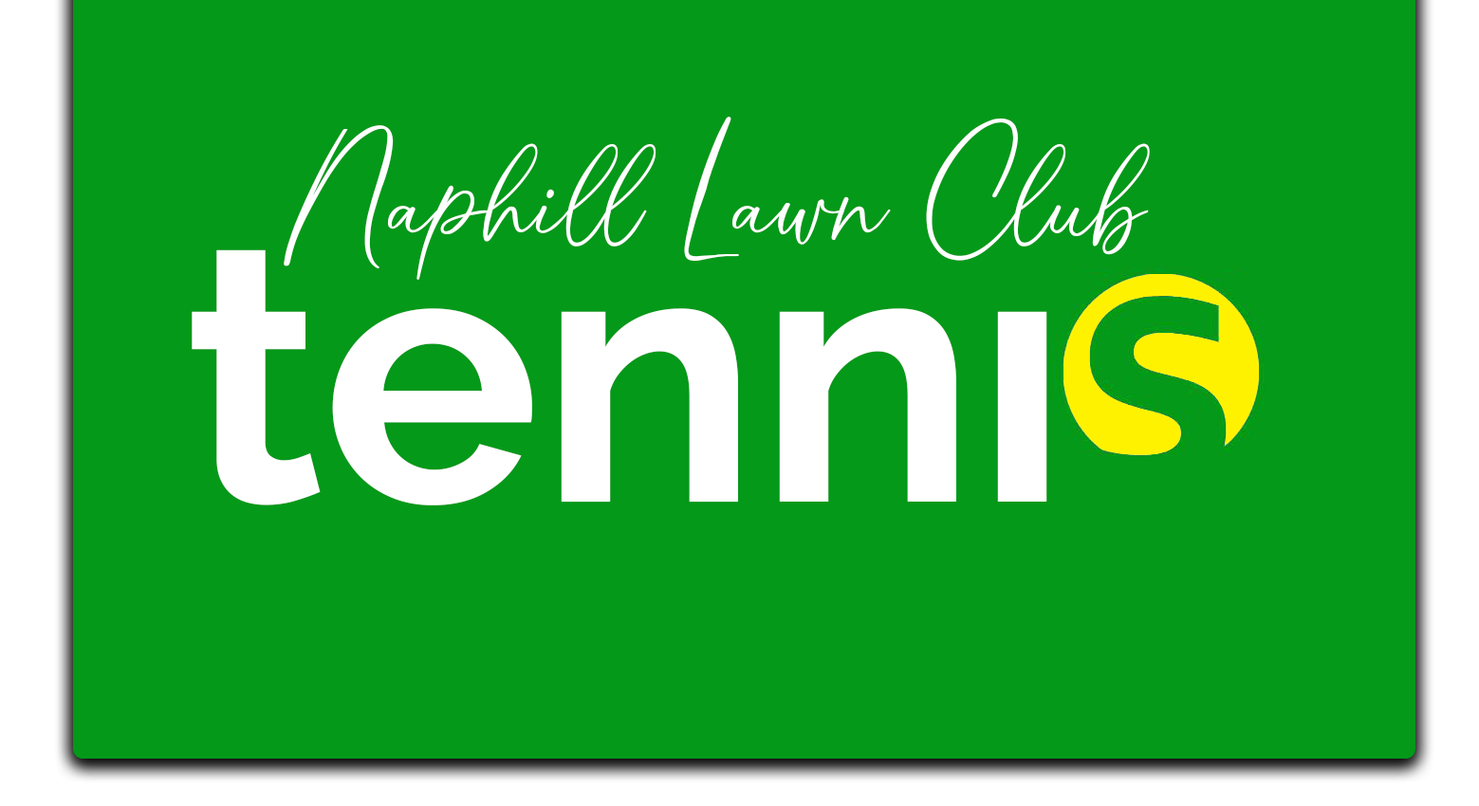
<style>
.page{position:relative;width:1479px;height:806px;background:#049919}
.page>*{position:absolute;margin:0}
.t1{font:203.9px "Angelina";color:#ffffff}
.t2{font:362.4px "Raleway-Bold";color:#ffffff}
</style>
<div class="page">
<p class="t1" style="left:284px;top:117px;width:866px;height:163px">Naphill Lawn Club</p>
<p class="t2" style="left:192px;top:237px;width:855px;height:269px">tenni</p>
</div>
